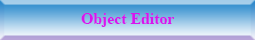
<style>
.page{position:relative;width:255px;height:40px}
.page>*{position:absolute;margin:0}
.t1{font:15.8px "TimesNewRomanPS-BoldMT";color:#d815ed}
</style>
<div class="page">
<p class="t1" style="left:81px;top:13px;width:94px;height:14px">Object Editor</p>
</div>
